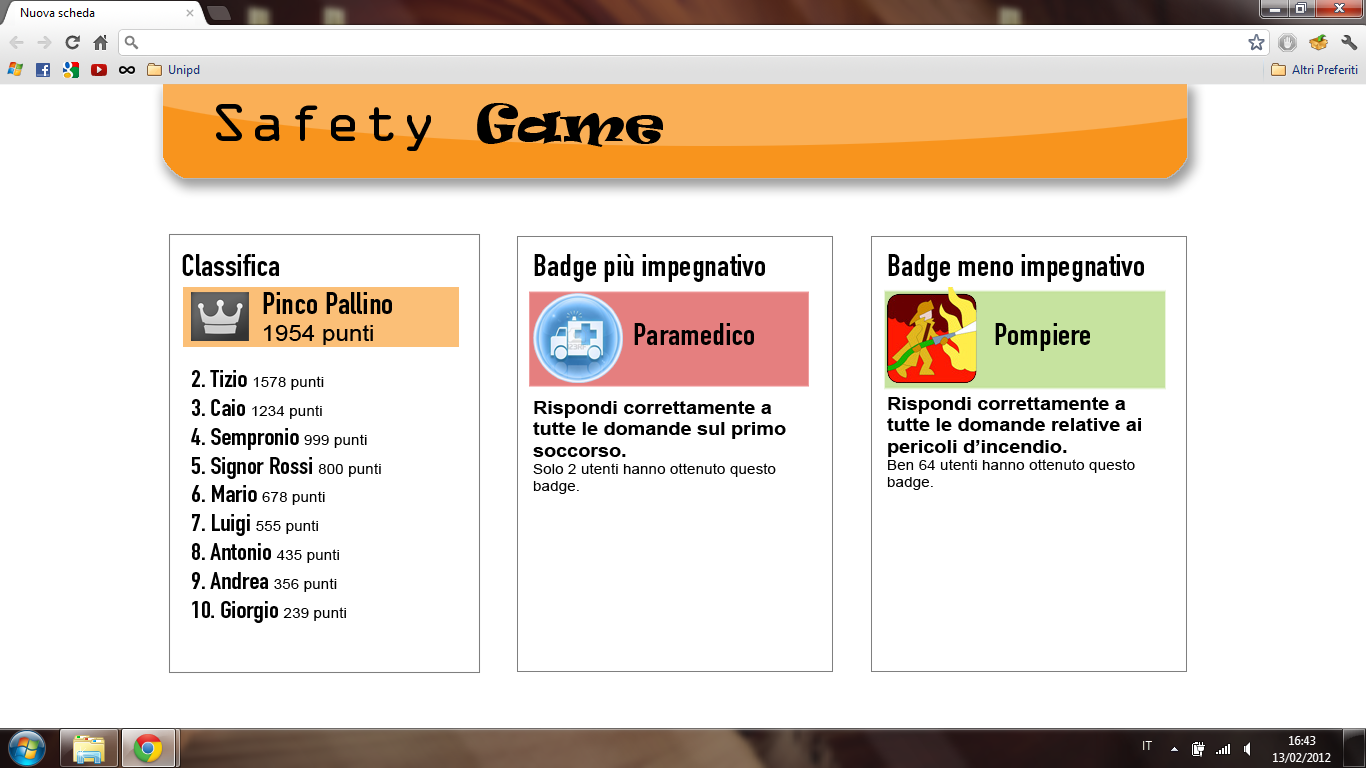
<style>
.page{position:relative;width:1366px;height:768px;background:#ffffff}
.page>*{position:absolute;margin:0}
.t1{font:48px "OCRAStd";color:#000000;scale:1.1 1}
.t2{font:48px "Ravie";color:#000000;scale:1.1 1}
.t3{font:30px "DINEngschriftStd";color:#000000;scale:1.1 1}
.t4{font:22px "ArialMT";color:#000000;scale:1.1 1}
.t5{font:24px "DINEngschriftStd";color:#000000;scale:1.1 1}
.t6{font:14px "ArialMT";color:#000000;scale:1.1 1}
.t7{font:18px "Arial-BoldMT";color:#000000;scale:1.1 1}
</style>
<div class="page">
<p class="t1" style="left:216px;top:103px;width:447px;height:48px">Safety <span class="t2">Game</span></p>
<p class="t3" style="left:182px;top:254px;width:97px;height:22px">Classifica</p>
<p class="t3" style="left:534px;top:254px;width:231px;height:28px">Badge più impegnativo</p>
<p class="t3" style="left:888px;top:254px;width:256px;height:28px">Badge meno impegnativo</p>
<p class="t3" style="left:263px;top:292px;width:129px;height:53px">Pinco Pallino<br><span class="t4">1954 punti</span></p>
<p class="t3" style="left:634px;top:323px;width:120px;height:22px">Paramedico</p>
<p class="t3" style="left:995px;top:323px;width:95px;height:28px">Pompiere</p>
<p class="t5" style="left:191px;top:370px;width:190px;height:253px">2. Tizio <span class="t6">1578 punti<br></span>3. Caio <span class="t6">1234 punti<br></span>4. Sempronio <span class="t6">999 punti<br></span>5. Signor Rossi <span class="t6">800 punti<br></span>6. Mario <span class="t6">678 punti<br></span>7. Luigi <span class="t6">555 punti<br></span>8. Antonio <span class="t6">435 punti<br></span>9. Andrea <span class="t6">356 punti<br></span>10. Giorgio <span class="t6">239 punti</span></p>
<p class="t7" style="left:533px;top:401px;width:253px;height:93px">Rispondi correttamente a tutte le domande sul primo soccorso.<br><span class="t6">Solo 2 utenti hanno ottenuto questo badge.</span></p>
<p class="t7" style="left:887px;top:397px;width:254px;height:93px">Rispondi correttamente a tutte le domande relative ai pericoli d’incendio.<br><span class="t6">Ben 64 utenti hanno ottenuto questo badge.</span></p>
</div>
